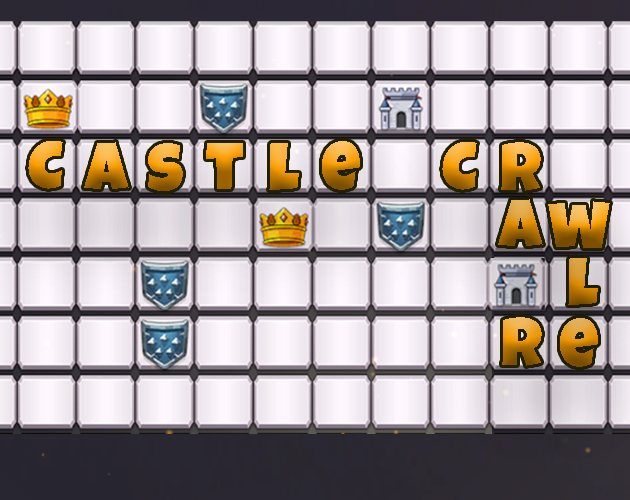
<style>
.page{position:relative;width:630px;height:500px}
.page>*{position:absolute;margin:0}
.t1{font:67.6px "LuckiestGuy-Regular"}
</style>
<div class="page">
<p class="t1" style="left:28px;top:141px;width:35px;height:48px">C</p>
<p class="t1" style="left:84px;top:142px;width:45px;height:47px">a</p>
<p class="t1" style="left:148px;top:143px;width:35px;height:48px">s</p>
<p class="t1" style="left:206px;top:143px;width:37px;height:46px">t</p>
<p class="t1" style="left:269px;top:143px;width:30px;height:47px">l</p>
<p class="t1" style="left:322px;top:141px;width:38px;height:49px">e</p>
<p class="t1" style="left:442px;top:142px;width:35px;height:48px">C</p>
<p class="t1" style="left:501px;top:142px;width:40px;height:49px">r</p>
<p class="t1" style="left:498px;top:199px;width:45px;height:47px">a</p>
<p class="t1" style="left:548px;top:201px;width:62px;height:47px">w</p>
<p class="t1" style="left:568px;top:258px;width:30px;height:47px">l</p>
<p class="t1" style="left:502px;top:317px;width:40px;height:49px">r</p>
<p class="t1" style="left:560px;top:318px;width:38px;height:49px">e</p>
</div>
